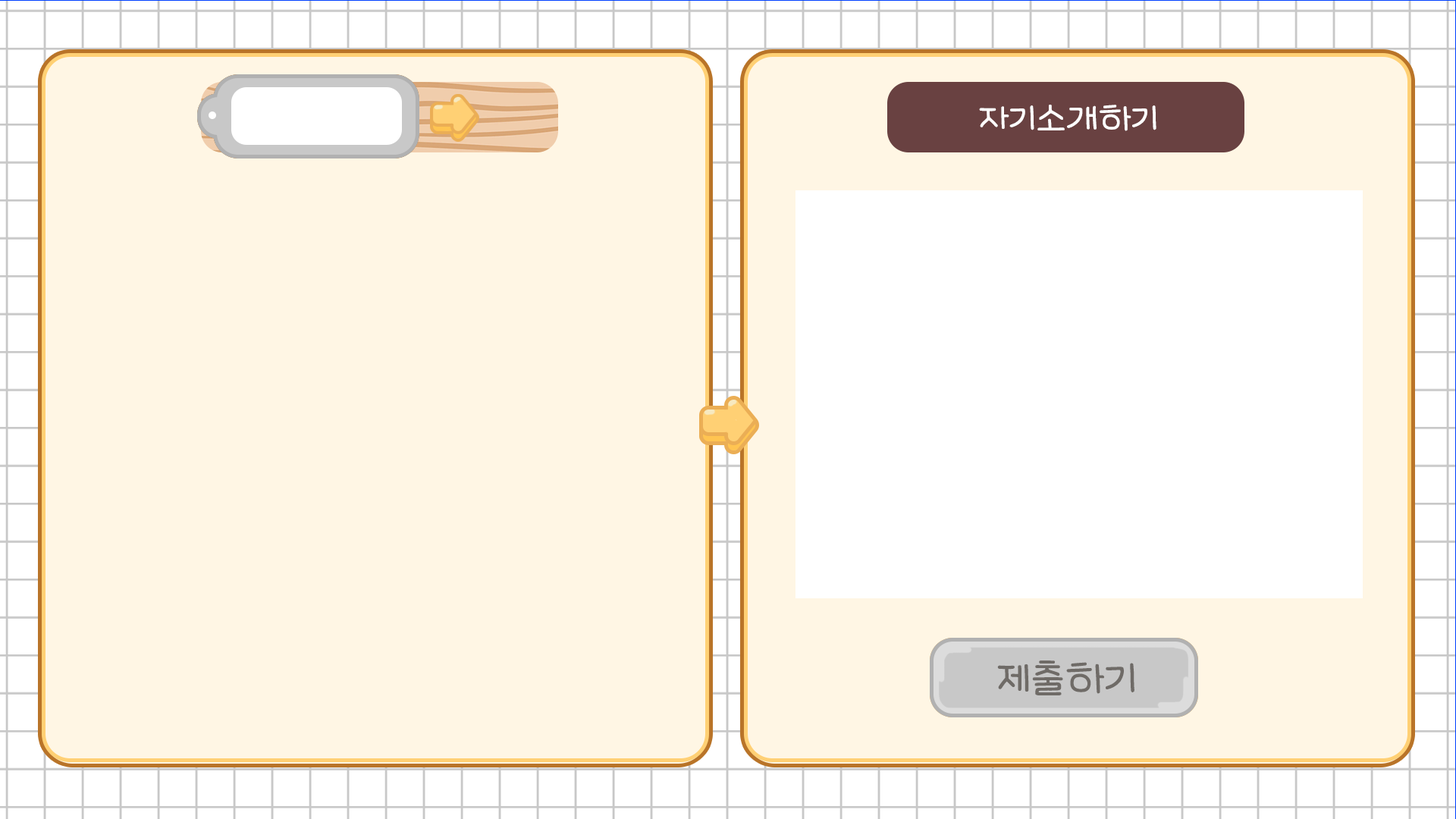
<style>
.page{position:relative;width:1456px;height:819px;background:#fff6e4}
.page>*{position:absolute;margin:0}
.t1{font:37.9px "LeeSeoyun";color:#ffffff}
.t2{font:45.5px "LeeSeoyun";color:#6f6b67}
</style>
<div class="page">
<p class="t1" style="left:979px;top:105px;width:177px;height:26px">자기소개하기</p>
<p class="t2" style="left:997px;top:660px;width:137px;height:35px">제출하기</p>
<p class="t2" style="left:997px;top:660px;width:137px;height:35px">제출하기</p>
</div>
